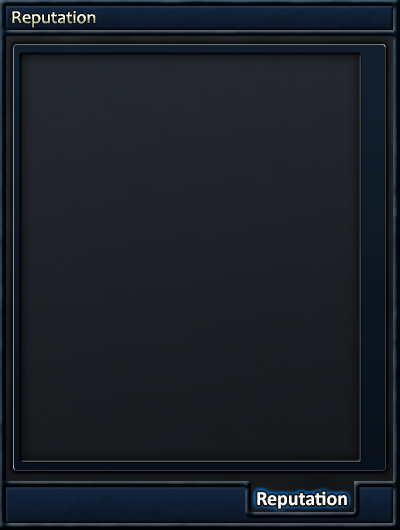
<style>
.page{position:relative;width:400px;height:530px}
.page>*{position:absolute;margin:0}
.t1{font:18px "Candara"}
.t2{font:20px "Calibri-Bold";color:#ffffff}
</style>
<div class="page">
<p class="t1" style="left:12px;top:11px;width:84px;height:17px">Reputation</p>
<p class="t2" style="left:257px;top:491px;width:90px;height:18px">Reputation</p>
</div>
